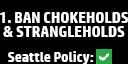
<style>
.page{position:relative;width:128px;height:64px;background:#000000}
.page>*{position:absolute;margin:0}
.t1{font:15.3px/14.6px "HPSimplified-Bold";letter-spacing:-0.01em;color:#ffffff}
.t2{font:14.2px "HPSimplified-Bold";letter-spacing:-0.01em;color:#ffffff}
</style>
<div class="page">
<p class="t1" style="left:0px;top:12px;width:128px;height:25px;text-align:center">1. BAN CHOKEHOLDS<br>&amp; STRANGLEHOLDS</p>
<p class="t2" style="left:8px;top:51px;width:86px;height:14px">Seattle Policy:</p>
</div>
